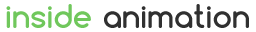
<style>
.page{position:relative;width:256px;height:32px;background:#ffffff}
.page>*{position:absolute;margin:0}
.t1{font:30.8px "Comfortaa-Bold";color:#70c75c}
.t2{font:30.8px "Comfortaa-Bold";color:#303030}
</style>
<div class="page">
<p class="t1" style="left:6px;top:4px;width:85px;height:24px">inside</p>
<p class="t2" style="left:104px;top:4px;width:145px;height:24px">animation</p>
</div>
